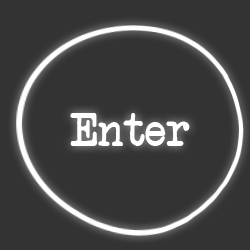
<style>
.page{position:relative;width:250px;height:250px;background:#333333}
.page>*{position:absolute;margin:0}
.t1{font:45px "AnotherTypewriter";color:#ffffff}
</style>
<div class="page">
<p class="t1" style="left:70px;top:113px;width:120px;height:33px">Enter</p>
</div>
